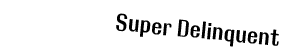
<style>
.page{position:relative;width:283px;height:56px;background:#ffffff}
.page>*{position:absolute;margin:0}
.t1{font:24px "RolloutPlain";color:#000000}
</style>
<div class="page">
<p class="t1" style="left:116px;top:13px;width:163px;height:34px;rotate:6deg">Super Delinquent</p>
</div>
